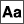
<style>
.page{position:relative;width:24px;height:24px;background:#ffffff}
.page>*{position:absolute;margin:0}
.t1{font:15.7px "Helvetica-Bold";color:#000000}
</style>
<div class="page">
<p class="t1" style="left:2px;top:6px;width:20px;height:12px">Aa</p>
</div>
